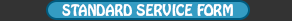
<style>
.page{position:relative;width:292px;height:21px;background:#333333}
.page>*{position:absolute;margin:0}
.t1{font:14px "HoboStd";color:#ffffff;text-transform:uppercase;scale:0.96 1}
</style>
<div class="page">
<p class="t1" style="left:62px;top:4px;width:171px;height:13px">Standard Service Form</p>
</div>
